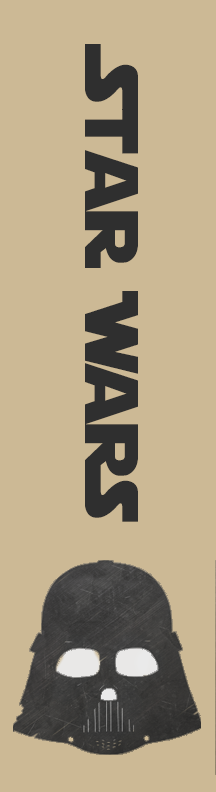
<style>
.page{position:relative;width:216px;height:792px;background:#ccb995}
.page>*{position:absolute;margin:0}
.t1{font:75px "StarJedi";color:#2f2f2f}
</style>
<div class="page">
<p class="t1" style="left:85px;top:44px;width:53px;height:478px;rotate:90deg">Star Wars</p>
</div>
